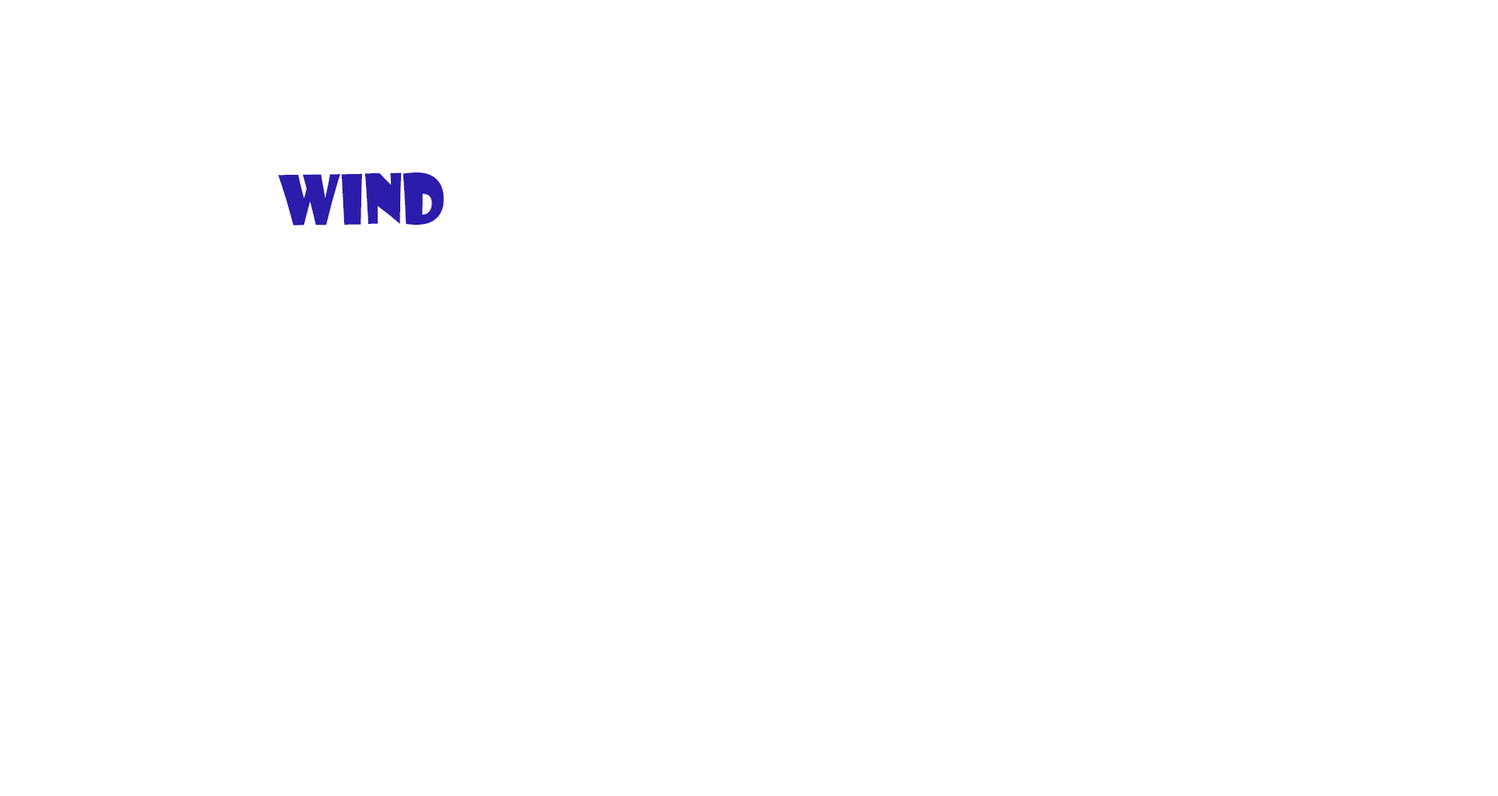
<style>
.page{position:relative;width:1498px;height:796px;background:#ffffff}
.page>*{position:absolute;margin:0}
.t1{font:67.3px "ShowcardGothic-Reg";color:#2b1cac;scale:0.9 1}
</style>
<div class="page">
<p class="t1" style="left:278px;top:172px;width:166px;height:54px;rotate:-1deg">WIND</p>
</div>
